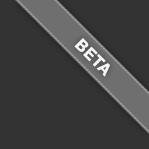
<style>
.page{position:relative;width:149px;height:149px;background:#333333}
.page>*{position:absolute;margin:0}
.t1{font:16px "HelveticaNeue-Bold";letter-spacing:0.05em;color:#ffffff}
</style>
<div class="page">
<p class="t1" style="left:74px;top:38px;width:36px;height:39px;rotate:45deg">BETA</p>
</div>
